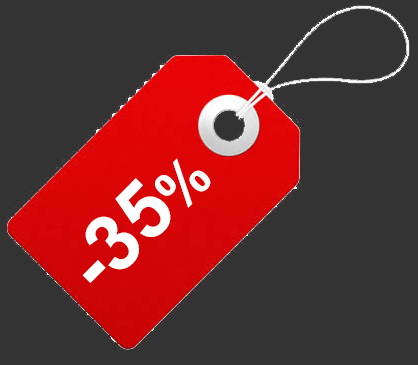
<style>
.page{position:relative;width:418px;height:365px;background:#333333}
.page>*{position:absolute;margin:0}
.t1{font:80px "Arial-BoldMT";color:#fefefe}
.t2{font:56.6px "Arial-BoldMT";color:#fefefe}
</style>
<div class="page">
<p class="t1" style="left:82px;top:158px;width:129px;height:125px;rotate:-45deg">-35<span class="t2">%</span></p>
</div>
